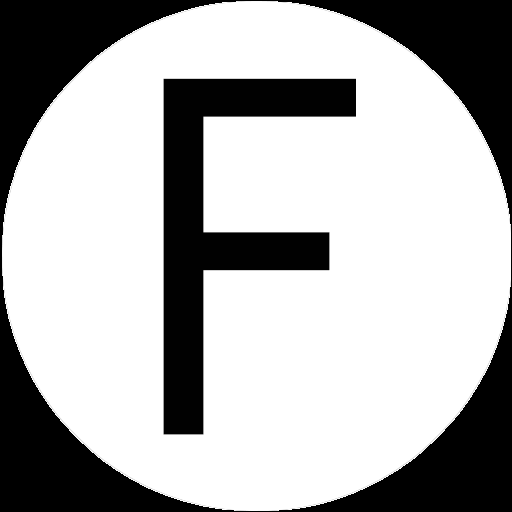
<style>
.page{position:relative;width:512px;height:512px;background:#ffffff}
.page>*{position:absolute;margin:0}
.t1{font:533.3px "Gidole-Regular";color:#010101;font-weight:bold}
</style>
<div class="page">
<p class="t1" style="left:163px;top:78px;width:193px;height:357px">F</p>
</div>
